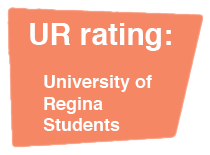
<style>
.page{position:relative;width:210px;height:155px;background:#f58765}
.page>*{position:absolute;margin:0}
.t1{font:18px "Helvetica-Bold";color:#ffffff}
.t2{font:30px "Helvetica-Bold";color:#ffffff}
</style>
<div class="page">
<p class="t1" style="left:30px;top:23px;width:141px;height:108px"><span class="t2">UR rating:<br></span><br>   University of<br>   Regina<br>   Students</p>
</div>
